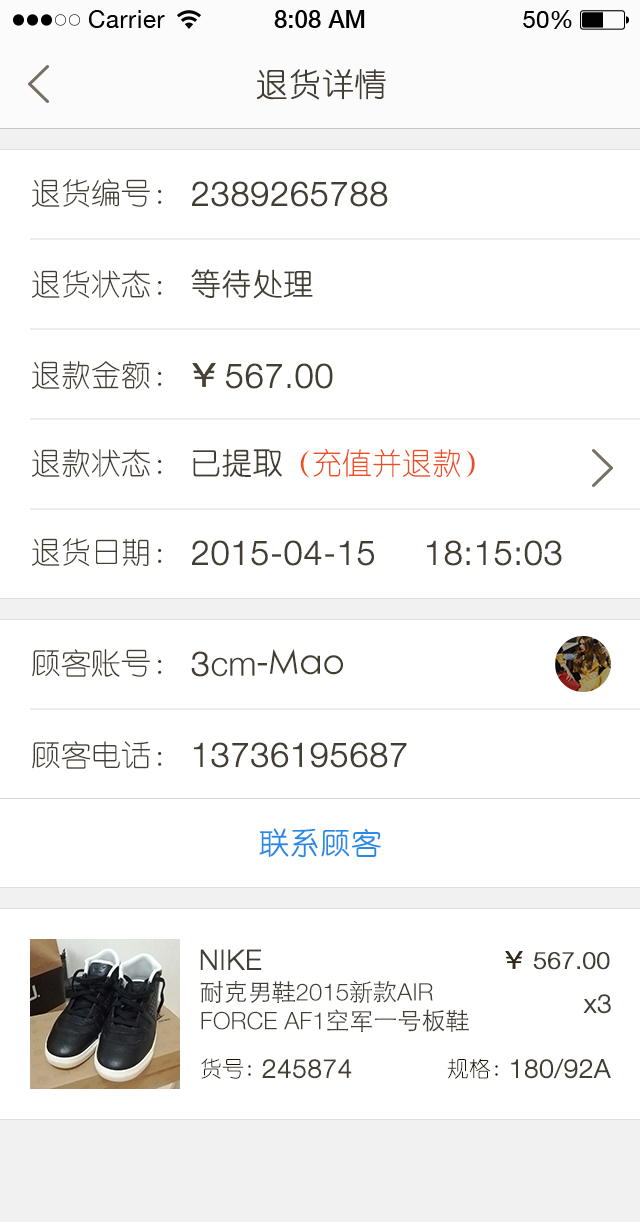
<style>
.page{position:relative;width:640px;height:1222px;background:#ffffff}
.page>*{position:absolute;margin:0}
.t1{font:32px "YouYuan";color:#433d33;text-transform:uppercase;font-weight:bold}
.t2{font:30px "YouYuan";color:#433e34;text-transform:uppercase}
.t3{font:34px "HelveticaNeueLTPro-Lt";color:#433e34;text-transform:uppercase;font-weight:bold}
.t4{font:30px "YouYuan";color:#433e34;text-transform:uppercase;font-weight:bold}
.t5{font:30px "YouYuan";color:#ed4e1f;text-transform:uppercase}
.t6{font:34px "STHeitiSC-Light";color:#433e34}
.t7{font:34px "HelveticaNeueLTPro-Lt";color:#433e34}
.t8{font:30px "YouYuan";color:#298ae4;text-transform:uppercase;font-weight:bold}
.t9{font:28px "HelveticaNeueLTPro-Lt";color:#433e34;text-transform:uppercase;font-weight:bold}
.t10{font:24px "HelveticaNeueLTPro-Lt";color:#433e34;text-transform:uppercase;font-weight:bold}
.t11{font:24px "HelveticaNeueLTPro-Lt";color:#433e34;text-transform:uppercase}
.t12{font:24px "STHeitiSC-Light";color:#433e34;text-transform:uppercase}
.t13{font:26px "HelveticaNeueLTPro-Lt";color:#433e34;font-weight:bold}
.t14{font:22px "YouYuan";color:#1b1100;text-transform:uppercase}
.t15{font:26px "HelveticaNeueLTPro-Lt";color:#433e34;text-transform:uppercase;font-weight:bold}
</style>
<div class="page">
<p class="t1" style="left:257px;top:69px;width:129px;height:31px">退货详情</p>
<p class="t2" style="left:32px;top:178px;width:130px;height:29px">退货编号：</p>
<p class="t3" style="left:192px;top:181px;width:196px;height:26px">2389265788</p>
<p class="t2" style="left:32px;top:270px;width:130px;height:28px">退货状态：</p>
<p class="t4" style="left:191px;top:269px;width:122px;height:30px">等待处理</p>
<p class="t2" style="left:32px;top:361px;width:130px;height:28px">退款金额：</p>
<p class="t3" style="left:226px;top:363px;width:107px;height:26px">567.00</p>
<p class="t2" style="left:32px;top:449px;width:130px;height:28px">退款状态：</p>
<p class="t4" style="left:193px;top:449px;width:89px;height:28px">已提取</p>
<p class="t5" style="left:300px;top:448px;width:175px;height:30px">（充值并退款）</p>
<p class="t2" style="left:32px;top:538px;width:130px;height:28px">退货日期：</p>
<p class="t3" style="left:192px;top:540px;width:182px;height:26px">2015-04-15</p>
<p class="t3" style="left:427px;top:540px;width:135px;height:26px">18:15:03</p>
<p class="t2" style="left:32px;top:649px;width:130px;height:28px">顾客账号：</p>
<p class="t6" style="left:191px;top:649px;width:152px;height:28px"><span class="t3">3</span><span class="t7">cm</span>-Mao</p>
<p class="t2" style="left:32px;top:741px;width:130px;height:28px">顾客电话：</p>
<p class="t3" style="left:194px;top:742px;width:213px;height:26px">13736195687</p>
<p class="t8" style="left:259px;top:828px;width:122px;height:30px">联系顾客</p>
<p class="t9" style="left:200px;top:949px;width:62px;height:21px">NIKE</p>
<p class="t10" style="left:533px;top:952px;width:77px;height:18px">567.00</p>
<p class="t11" style="left:200px;top:980px;width:269px;height:52px"><span class="t12">耐克男鞋</span>2015<span class="t12">新款</span>air force AF1<span class="t12">空军一号板鞋</span></p>
<p class="t13" style="left:583px;top:994px;width:28px;height:20px">x3</p>
<p class="t14" style="left:201px;top:1058px;width:50px;height:21px">货号:</p>
<p class="t15" style="left:262px;top:1059px;width:90px;height:20px">245874</p>
<p class="t14" style="left:447px;top:1058px;width:51px;height:21px">规格:</p>
<p class="t15" style="left:511px;top:1058px;width:100px;height:21px">180/92a</p>
</div>
